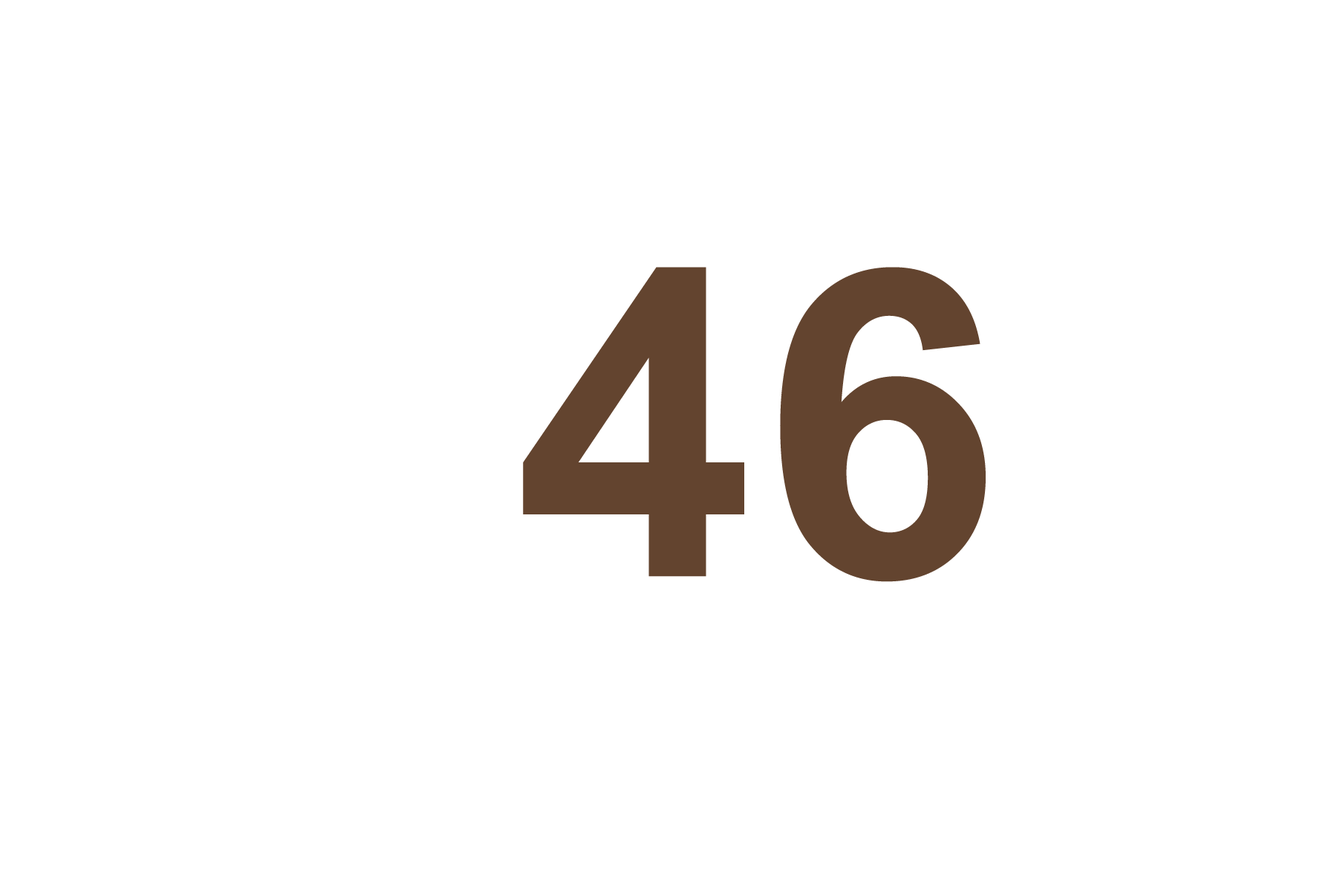
<style>
.page{position:relative;width:1337px;height:892px;background:#ffffff}
.page>*{position:absolute;margin:0}
.t1{font:429.6px "Arial-BoldMT";color:#63442f}
</style>
<div class="page">
<p class="t1" style="left:523px;top:267px;width:463px;height:315px">46</p>
</div>
